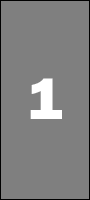
<style>
.page{position:relative;width:90px;height:200px;background:#7f7f7f}
.page>*{position:absolute;margin:0}
.t1{font:45px "FranklinGothic-Heavy";color:#ffffff}
</style>
<div class="page">
<p class="t1" style="left:30px;top:78px;width:32px;height:41px">1</p>
</div>
